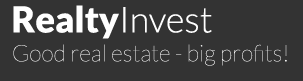
<style>
.page{position:relative;width:303px;height:81px;background:#333333}
.page>*{position:absolute;margin:0}
.t1{font:36px "Lato-Black";color:#ffffff}
.t2{font:36px "Lato-Light";color:#ffffff}
.t3{font:23px "Lato-Hairline";color:#ffffff}
</style>
<div class="page">
<p class="t1" style="left:13px;top:5px;width:199px;height:34px">Realty<span class="t2">Invest</span></p>
<p class="t3" style="left:13px;top:44px;width:274px;height:22px">Good real estate - big profits!</p>
</div>
